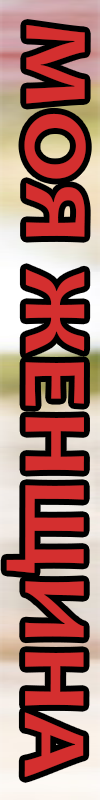
<style>
.page{position:relative;width:100px;height:800px;background:#d42f2f}
.page>*{position:absolute;margin:0}
.t1{font:91.5px "Candara-Bold";color:#d42f2f;scale:1.14 1}
</style>
<div class="page">
<p class="t1" style="left:6px;top:25px;width:80px;height:752px;rotate:90deg">МОЯ ЖЕНЩИНА</p>
</div>
